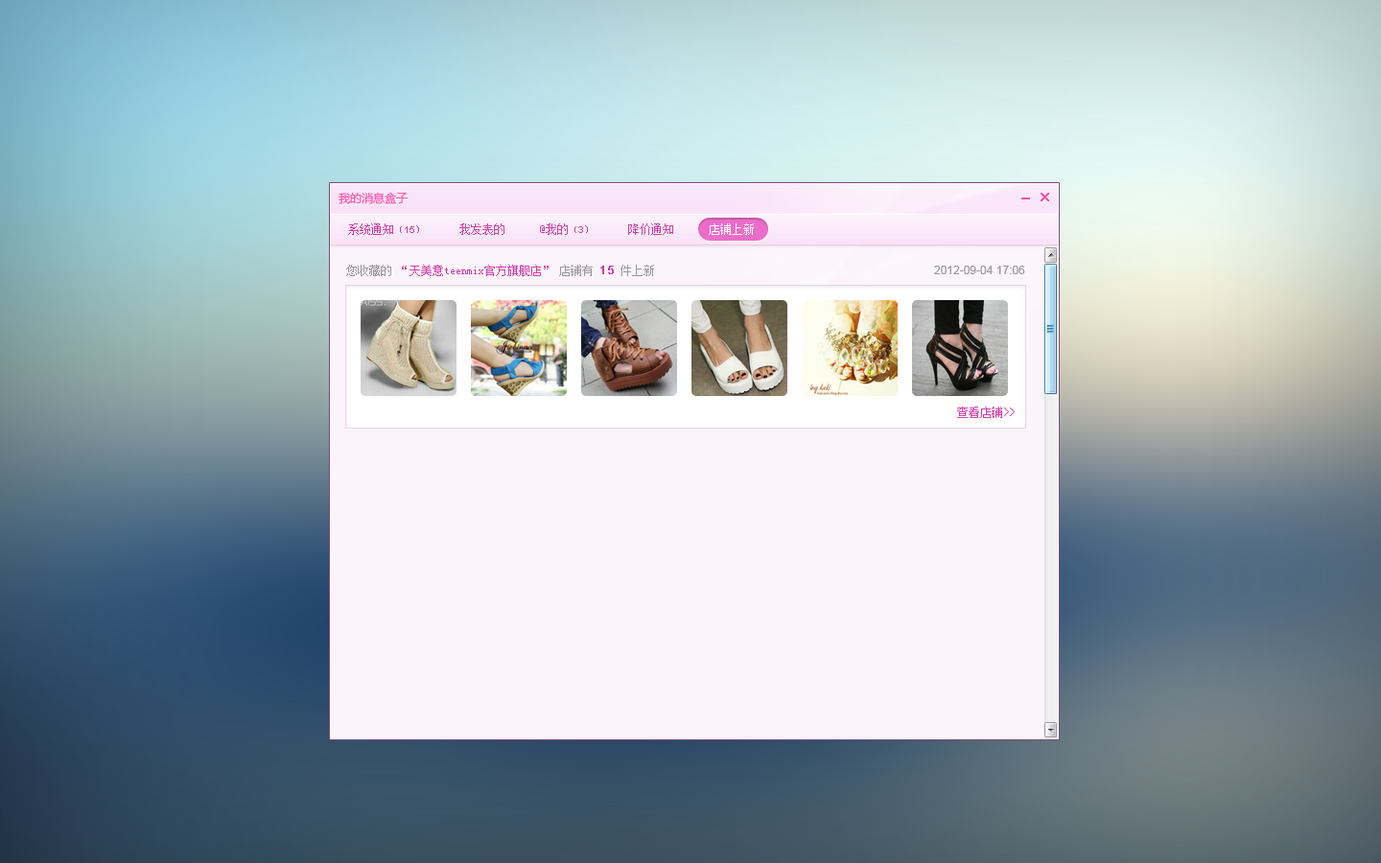
<style>
.page{position:relative;width:1381px;height:863px}
.page>*{position:absolute;margin:0}
.t1{font:11.5px "MicrosoftYaHei";color:#fc4ea9}
.t2{font:11.5px "SimSun";color:#d03da9}
.t3{font:9.6px "SimSun";color:#d03da9}
.t4{font:9.6px "ArialMT";color:#d03da9}
.t5{font:11.5px "SimSun";color:#ffffff}
.t6{font:11.5px "SimSun";color:#999999}
.t7{font:11.5px "ArialMT";color:#d03da9;font-weight:bold}
.t8{font:11.5px "ArialMT";color:#999999}
</style>
<div class="page">
<p class="t1" style="left:339px;top:192px;width:69px;height:12px">我的消息盒子</p>
<p class="t2" style="left:348px;top:223px;width:406px;height:12px">系统通知<span class="t3">（</span><span class="t4">15</span><span class="t3">）　　　</span>我发表的　　　@我的<span class="t3">（</span><span class="t4">3</span><span class="t3">）</span>　　　降价通知　　　<span class="t5">店铺上新</span></p>
<p class="t2" style="left:346px;top:265px;width:308px;height:11px"><span class="t6">您收藏的 </span>“天美意teenmix官方旗舰店” <span class="t6">店铺有 </span><span class="t7">15</span><span class="t6"> 件上新</span></p>
<p class="t8" style="left:934px;top:266px;width:91px;height:8px">2012-09-04 17:06</p>
<p class="t2" style="left:957px;top:407px;width:58px;height:11px">查看店铺&gt;&gt;</p>
</div>
